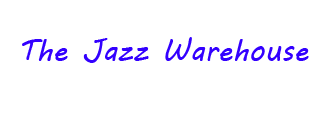
<style>
.page{position:relative;width:320px;height:120px;background:#ffffff}
.page>*{position:absolute;margin:0}
.t1{font:30px "MVBoli";color:#3300ff}
</style>
<div class="page">
<p class="t1" style="left:22px;top:37px;width:287px;height:26px">The Jazz Warehouse</p>
</div>
